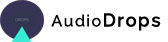
<style>
.page{position:relative;width:168px;height:42px;background:#ffffff}
.page>*{position:absolute;margin:0}
.t1{font:16px "Raleway-Medium";letter-spacing:0.08em;color:#000000}
.t2{font:18px "Raleway-Medium";letter-spacing:0.08em;color:#000000;font-weight:bold}
</style>
<div class="page">
<p class="t1" style="left:51px;top:13px;width:110px;height:18px">Audio<span class="t2">Drops</span></p>
</div>
